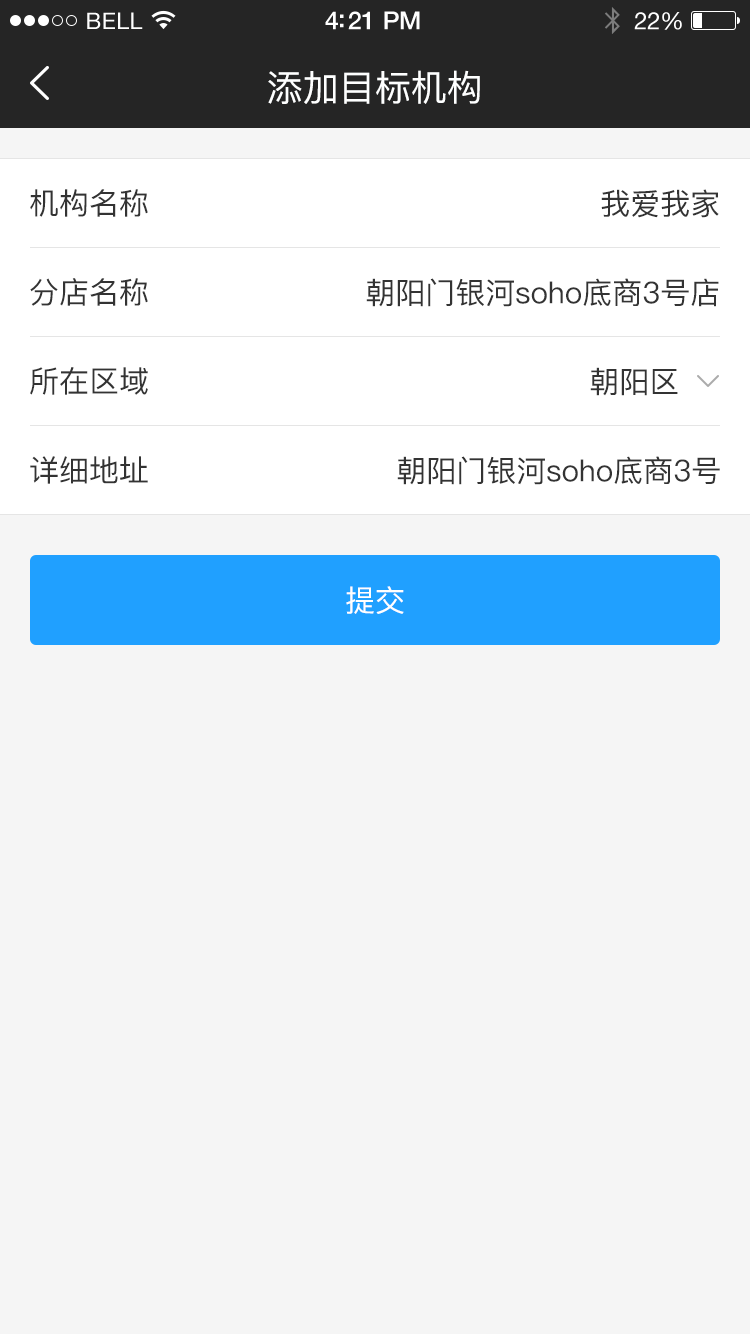
<style>
.page{position:relative;width:750px;height:1334px;background:#f5f5f5}
.page>*{position:absolute;margin:0}
.t1{font:23px "HelveticaNeue";letter-spacing:0.02em;color:#ffffff}
.t2{font:25px "HelveticaNeue-Medium";letter-spacing:-0.02em;color:#ffffff}
.t3{font:24px "HelveticaNeue";letter-spacing:-0.02em;color:#ffffff}
.t4{font:36px "PingFang-SC-Medium";color:#feffff}
.t5{font:30px "PingFang-SC-Medium";color:#333333}
.t6{font:30px "PingFang-SC-Medium";color:#ffffff}
</style>
<div class="page">
<p class="t1" style="left:87px;top:12px;width:56px;height:17px">BELL</p>
<p class="t2" style="left:325px;top:11px;width:95px;height:19px">4:21 PM</p>
<p class="t3" style="left:634px;top:12px;width:48px;height:18px">22%</p>
<p class="t4" style="left:268px;top:70px;width:212px;height:34px">添加目标机构</p>
<p class="t5" style="left:30px;top:189px;width:118px;height:28px">机构名称</p>
<p class="t5" style="left:601px;top:189px;width:118px;height:29px">我爱我家</p>
<p class="t5" style="left:30px;top:278px;width:118px;height:28px">分店名称</p>
<p class="t5" style="left:366px;top:278px;width:353px;height:29px">朝阳门银河soho底商3号店</p>
<p class="t5" style="left:30px;top:367px;width:118px;height:28px">所在区域</p>
<p class="t5" style="left:590px;top:367px;width:88px;height:29px">朝阳区</p>
<p class="t5" style="left:30px;top:456px;width:118px;height:28px">详细地址</p>
<p class="t5" style="left:397px;top:456px;width:323px;height:29px">朝阳门银河soho底商3号</p>
<p class="t6" style="left:346px;top:586px;width:58px;height:28px">提交</p>
</div>
